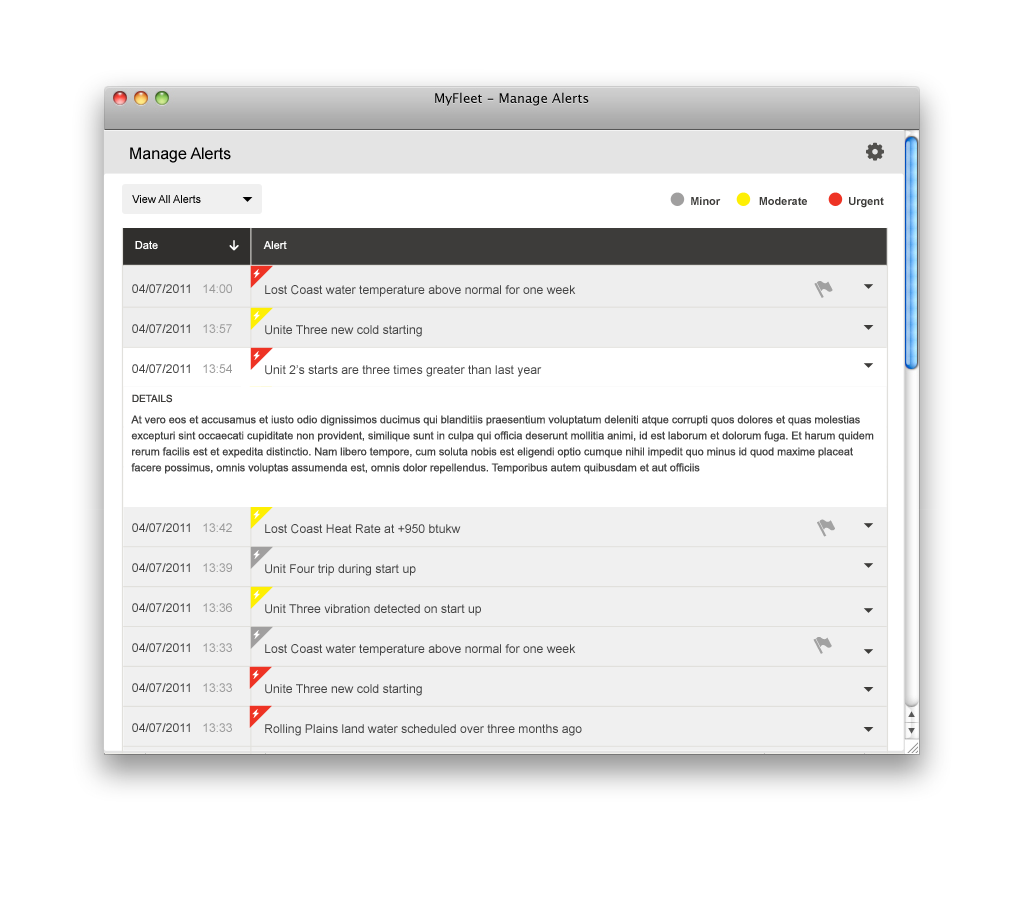
<style>
.page{position:relative;width:1024px;height:900px;background:#ffffff}
.page>*{position:absolute;margin:0}
.t1{font:16px "ArialMT";color:#000000}
.t2{font:11px "ArialMT";color:#000000}
.t3{font:11px "Arial-BoldMT";color:#3d3c3a}
.t4{font:11px "ArialMT";color:#ffffff}
.t5{font:11px "GEInspiraSymbol";color:#ffffff}
.t6{font:12.2px/39.9px "ArialMT";color:#444444;text-transform:uppercase}
.t7{font:12.2px/39.9px "ArialMT";color:#999999;text-transform:uppercase}
.t8{font:12.2px/39.9px "ArialMT";color:#444444}
.t9{font:9.9px "ArialMT";color:#3d3c3a}
.t10{font:10.8px/16px "ArialMT";color:#444444}
</style>
<div class="page">
<p class="t1" style="left:130px;top:147px;width:101px;height:16px">Manage Alerts</p>
<p class="t2" style="left:132px;top:195px;width:69px;height:8px">View All Alerts</p>
<p class="t3" style="left:691px;top:197px;width:30px;height:8px">Minor</p>
<p class="t3" style="left:759px;top:197px;width:48px;height:8px">Moderate</p>
<p class="t3" style="left:849px;top:197px;width:35px;height:11px">Urgent</p>
<p class="t4" style="left:135px;top:240px;width:104px;height:11px">Date                       <span class="t5">4</span></p>
<p class="t4" style="left:263px;top:241px;width:24px;height:9px">Alert</p>
<p class="t6" style="left:132px;top:284px;width:100px;height:448px">04/07/2011   <span class="t7">14:00<br></span>04/07/2011   <span class="t7">13:57<br></span>04/07/2011   <span class="t7">13:54<br></span>04/07/2011   <span class="t7">13:51<br></span>04/07/2011   <span class="t7">13:48<br></span>04/07/2011   <span class="t7">13:45<br></span>04/07/2011   <span class="t7">13:42<br></span>04/07/2011   <span class="t7">13:39<br></span>04/07/2011   <span class="t7">13:36<br></span>04/07/2011   <span class="t7">13:33<br></span>04/07/2011   <span class="t7">13:33<br></span>04/07/2011   <span class="t7">13:33</span></p>
<p class="t8" style="left:265px;top:285px;width:327px;height:451px">Lost Coast water temperature above normal for one week<br>Unite Three new cold starting<br>Unit 2’s starts are three times greater than last year<br>Rolling Plains land water scheduled over three months ago <br>Unit 3 megawatt output decreased by 10% since last outtage<br>Great Land reliability 0.5% below industry average<br>Lost Coast Heat Rate at +950 btukw<br>Unit Four trip during start up<br>Unit Three vibration detected on start up<br>Lost Coast water temperature above normal for one week<br>Unite Three new cold starting<br>Rolling Plains land water scheduled over three months ago</p>
<p class="t9" style="left:132px;top:394px;width:41px;height:9px">DETAILS</p>
<p class="t10" style="left:131px;top:415px;width:743px;height:59px">At vero eos et accusamus et iusto odio dignissimos ducimus qui blanditiis praesentium voluptatum deleniti atque corrupti quos dolores et quas molestias excepturi sint occaecati cupiditate non provident, similique sunt in culpa qui officia deserunt mollitia animi, id est laborum et dolorum fuga. Et harum quidem rerum facilis est et expedita distinctio. Nam libero tempore, cum soluta nobis est eligendi optio cumque nihil impedit quo minus id quod maxime placeat facere possimus, omnis voluptas assumenda est, omnis dolor repellendus. Temporibus autem quibusdam et aut officiis</p>
</div>
